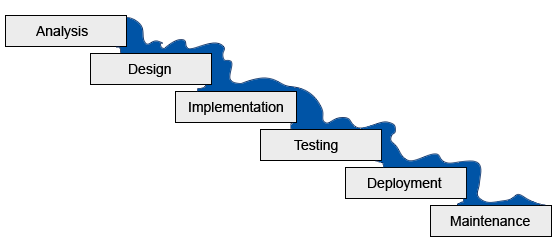
<style>
.page{position:relative;width:560px;height:250px;background:#ffffff}
.page>*{position:absolute;margin:0}
.t1{font:14px "ArialMT";color:#000000}
</style>
<div class="page">
<p class="t1" style="left:36px;top:26px;width:52px;height:13px">Analysis</p>
<p class="t1" style="left:129px;top:64px;width:42px;height:13px">Design</p>
<p class="t1" style="left:189px;top:101px;width:94px;height:14px">Implementation</p>
<p class="t1" style="left:294px;top:139px;width:44px;height:14px">Testing</p>
<p class="t1" style="left:368px;top:177px;width:74px;height:14px">Deployment</p>
<p class="t1" style="left:450px;top:215px;width:80px;height:11px">Maintenance</p>
</div>
